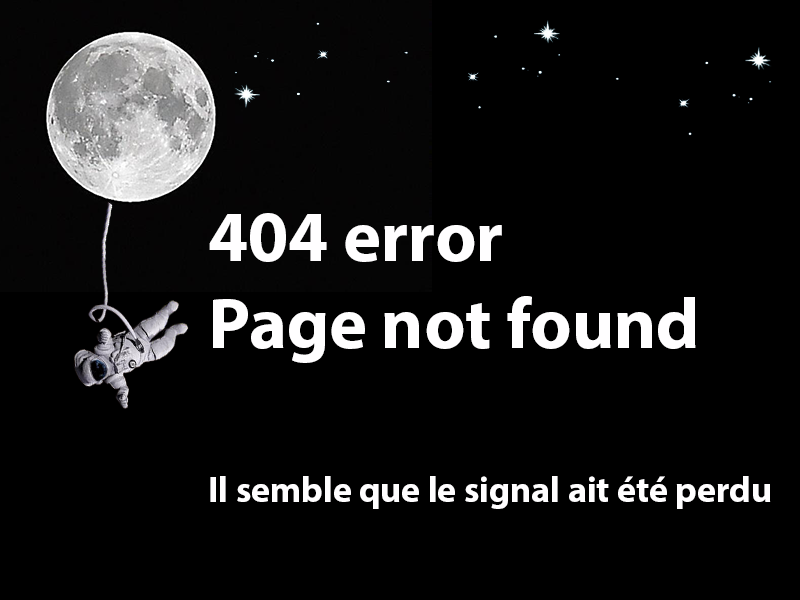
<style>
.page{position:relative;width:800px;height:600px;background:#000000}
.page>*{position:absolute;margin:0}
.t1{font:72px "MyriadPro-Bold";color:#fffeff}
.t2{font:36.1px "MyriadPro-Bold";color:#fffeff}
</style>
<div class="page">
<p class="t1" style="left:209px;top:213px;width:487px;height:150px">404 error<br>Page not found</p>
<p class="t2" style="left:210px;top:476px;width:561px;height:33px">Il semble que le signal ait été perdu</p>
</div>
